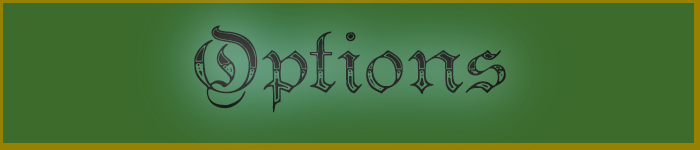
<style>
.page{position:relative;width:700px;height:150px;background:#3c6b2c}
.page>*{position:absolute;margin:0}
.t1{font:72px "TeutonicNo4-DemiBold";color:#2e2e2e}
</style>
<div class="page">
<p class="t1" style="left:194px;top:25px;width:312px;height:88px">Options</p>
</div>
